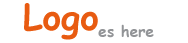
<style>
.page{position:relative;width:188px;height:43px;background:#ffffff}
.page>*{position:absolute;margin:0}
.t1{font:35.6px "ComicSansMS-Bold";color:#e85b11}
.t2{font:35.6px "ComicSansMS-Bold";color:#ffffff}
.t3{font:15.2px "ComicSansMS-Bold";color:#929497}
</style>
<div class="page">
<p class="t1" style="left:24px;top:3px;width:74px;height:37px"><span class="t2"> </span>Logo</p>
<p class="t3" style="left:98px;top:24px;width:56px;height:14px">es here</p>
</div>
